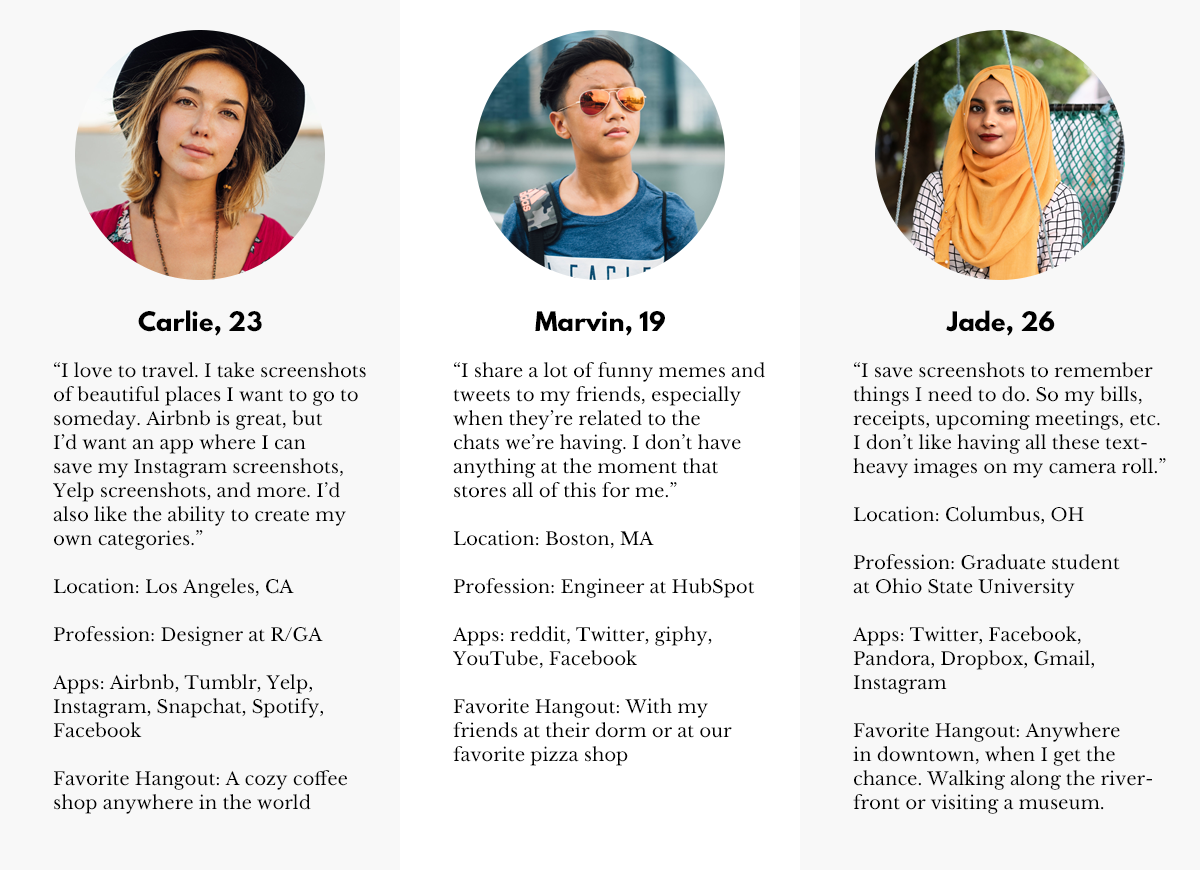
<style>
.page{position:relative;width:1200px;height:870px;background:#f8f8f8}
.page>*{position:absolute;margin:0}
.t1{font:24px "LeagueSpartan-Bold";color:#000000}
.t2{font:18px/24px "LibreBaskerville-Regular";color:#000000}
</style>
<div class="page">
<p class="t1" style="left:138px;top:310px;width:124px;height:26px">Carlie, 23</p>
<p class="t1" style="left:535px;top:311px;width:130px;height:25px">Marvin, 19</p>
<p class="t1" style="left:946px;top:310px;width:109px;height:26px">Jade, 26</p>
<p class="t2" style="left:53px;top:362px;width:313px;height:452px">“I love to travel. I take screenshots<br>of beautiful places I want to go to<br>someday. Airbnb is great, but<br>I’d want an app where I can<br>save my Instagram screenshots,<br>Yelp screenshots, and more. I’d<br>also like the ability to create my<br>own categories.”<br><br>Location: Los Angeles, CA<br><br>Profession: Designer at R/GA<br><br>Apps: Airbnb, Tumblr, Yelp,<br>Instagram, Snapchat, Spotify, <br>Facebook<br><br>Favorite Hangout: A cozy coffee<br>shop anywhere in the world</p>
<p class="t2" style="left:453px;top:362px;width:312px;height:404px">“I share a lot of funny memes and<br>tweets to my friends, especially<br>when they’re related to the<br>chats we’re having. I don’t have<br>anything at the moment that<br>stores all of this for me.”<br><br>Location: Boston, MA<br><br>Profession: Engineer at HubSpot<br><br>Apps: reddit, Twitter, giphy,<br>YouTube, Facebook<br><br>Favorite Hangout: With my <br>friends at their dorm or at our<br>favorite pizza shop</p>
<p class="t2" style="left:853px;top:362px;width:313px;height:452px">“I save screenshots to remember<br>things I need to do. So my bills,<br>receipts, upcoming meetings, etc.<br>I don’t like having all these text-<br>heavy images on my camera roll.”<br><br>Location: Columbus, OH<br><br>Profession: Graduate student<br>at Ohio State University<br><br>Apps: Twitter, Facebook,<br>Pandora, Dropbox, Gmail,<br>Instagram<br><br>Favorite Hangout: Anywhere<br>in downtown, when I get the<br>chance. Walking along the river-<br>front or visiting a museum.</p>
</div>
